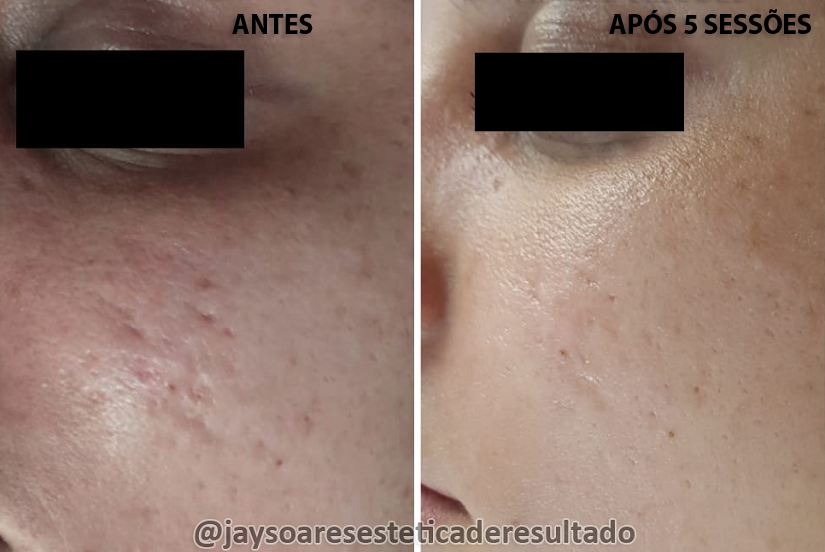
<style>
.page{position:relative;width:825px;height:552px}
.page>*{position:absolute;margin:0}
.t1{font:29.1px "MyriadPro-Bold";color:#000000;scale:0.94 1}
</style>
<div class="page">
<p class="t1" style="left:232px;top:14px;width:81px;height:20px">ANTES</p>
<p class="t1" style="left:609px;top:9px;width:202px;height:25px">APÓS 5 SESSÕES</p>
</div>
